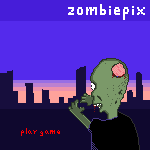
<style>
.page{position:relative;width:150px;height:150px;background:#542aec}
.page>*{position:absolute;margin:0}
.t1{font:24px "Pixel-MYZ";color:#ffffff}
.t2{font:12px "Pixel-MYZ";color:#ff0000}
</style>
<div class="page">
<p class="t1" style="left:68px;top:4px;width:77px;height:16px">zombiepix</p>
<p class="t2" style="left:21px;top:128px;width:39px;height:8px">play game</p>
</div>
